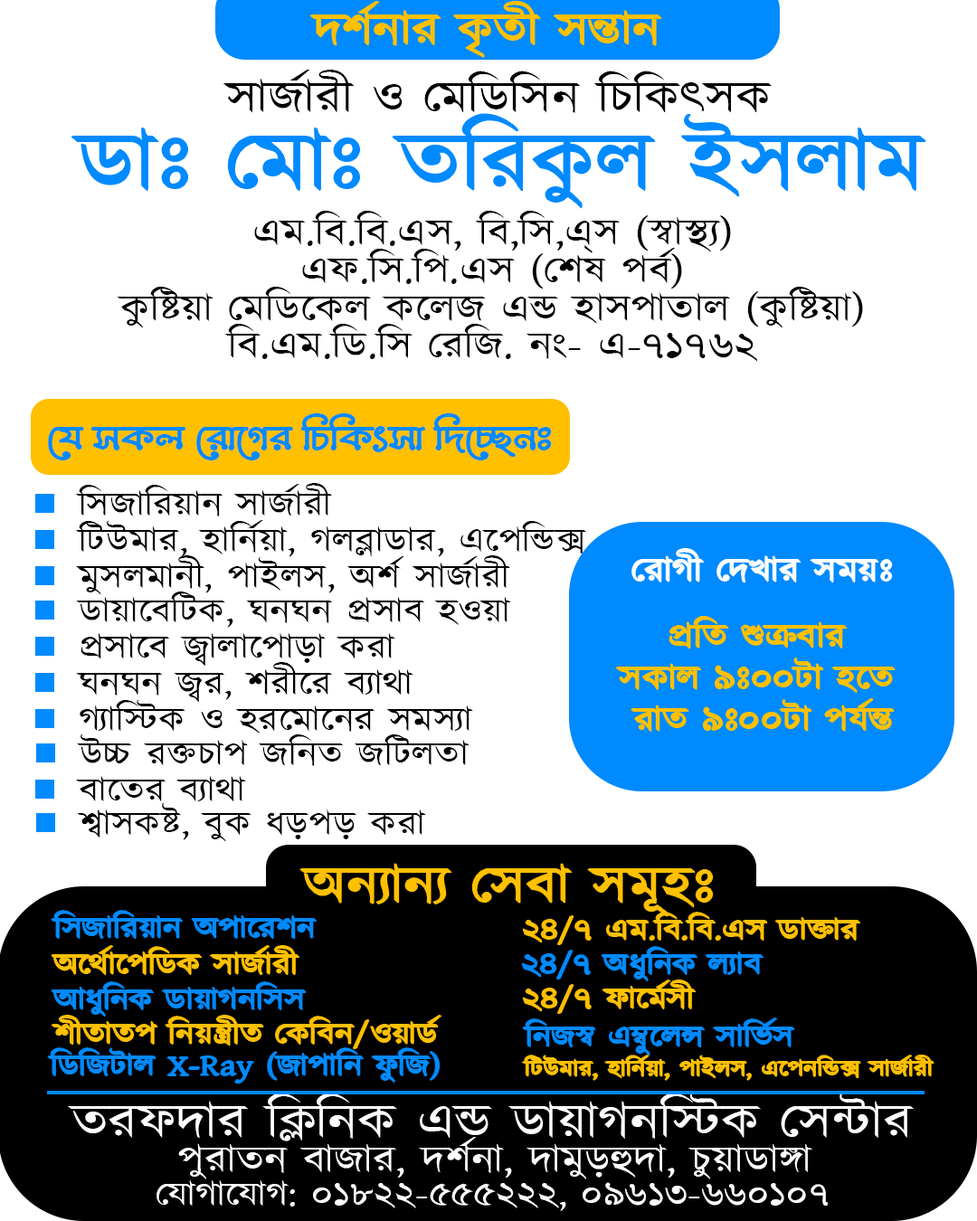
<style>
.page{position:relative;width:977px;height:1221px;background:#ffffff}
.page>*{position:absolute;margin:0}
.t1{font:45.2px "Kalpurush";color:#ffc000;scale:1.16 1}
.t2{font:45.2px "Kalpurush";color:#000000;scale:1.16 1}
.t3{font:82.9px "Kalpurush";color:#008aff;scale:1.16 1}
.t4{font:37.7px/37.7px "Kalpurush";color:#000000;scale:1.16 1}
.t5{font:37.7px "LiShohidBarkatUnicode";color:#008aff;scale:1.16 1}
.t6{font:33.9px "Kalpurush";color:#000000;scale:1.16 1}
.t7{font:33.9px "Kalpurush";color:#ffffff;scale:1.16 1}
.t8{font:33.9px/41.4px "Kalpurush";color:#ffc000;scale:1.16 1}
.t9{font:52.8px "Kalpurush";color:#ffc000;scale:1.16 1}
.t10{font:30.1px "Kalpurush";color:#008aff;scale:1.16 1}
.t11{font:30.1px "Kalpurush";color:#ffc000;scale:1.16 1}
.t12{font:22.6px "Kalpurush";color:#ffc000;scale:1.16 1}
.t13{font:49px "Kalpurush";color:#ffffff;scale:1.16 1}
.t14{font:37.7px "Kalpurush";color:#ffffff;scale:1.16 1}
.t15{font:33.9px "Kalpurush";color:#fffefe;scale:1.16 1}
</style>
<div class="page">
<p class="t1" style="left:310px;top:2px;width:351px;height:55px">দর্শনার কৃতী সন্তান</p>
<p class="t2" style="left:222px;top:70px;width:549px;height:43px">সার্জারী ও মেডিসিন চিকিৎসক</p>
<p class="t3" style="left:71px;top:114px;width:854px;height:94px">ডাঃ মোঃ তরিকুল ইসলাম</p>
<p class="t4" style="left:117px;top:211px;width:746px;height:151px;text-align:center">এম.বি.বি.এস, বি,সি,এ্স (স্বাস্থ্য)<br>এফ.সি.পি.এস (শেষ পর্ব)<br>কুষ্টিয়া মেডিকেল কলেজ এন্ড হাসপাতাল (কুষ্টিয়া)<br>বি.এম.ডি.সি রেজি. নং- এ-৭১৭৬২</p>
<p class="t5" style="left:48px;top:413px;width:504px;height:47px">যে সকল রোগের চিকিৎসা দিচ্ছেনঃ</p>
<p class="t6" style="left:75px;top:483px;width:258px;height:33px">সিজারিয়ান সার্জারী</p>
<p class="t6" style="left:75px;top:520px;width:511px;height:37px">টিউমার, হার্নিয়া, গলব্লাডার, এপেন্ডিক্স</p>
<p class="t6" style="left:76px;top:555px;width:435px;height:40px">মুসলমানী, পাইলস, অর্শ সার্জারী</p>
<p class="t7" style="left:632px;top:549px;width:260px;height:33px">রোগী দেখার সময়ঃ</p>
<p class="t6" style="left:76px;top:591px;width:435px;height:37px">ডায়াবেটিক, ঘনঘন প্রসাব হওয়া</p>
<p class="t8" style="left:616px;top:617px;width:278px;height:115px;text-align:center">প্রতি শুক্রবার <br>সকাল ৯ঃ০০টা হতে <br>রাত ৯ঃ০০টা পর্যন্ত</p>
<p class="t6" style="left:80px;top:633px;width:315px;height:33px">প্রসাবে জ্বালাপোড়া করা</p>
<p class="t6" style="left:76px;top:662px;width:337px;height:40px">ঘনঘন জ্বর, শরীরে ব্যাথা</p>
<p class="t6" style="left:80px;top:700px;width:393px;height:34px">গ্যাস্টিক ও হরমোনের সমস্যা</p>
<p class="t6" style="left:77px;top:734px;width:392px;height:32px">উচ্চ রক্তচাপ জনিত জটিলতা</p>
<p class="t6" style="left:76px;top:776px;width:170px;height:26px">বাতের ব্যাথা</p>
<p class="t6" style="left:77px;top:803px;width:349px;height:39px">শ্বাসকষ্ট, বুক ধড়পড় করা</p>
<p class="t9" style="left:300px;top:864px;width:413px;height:52px">অন্যান্য সেবা সমূহঃ</p>
<p class="t10" style="left:52px;top:911px;width:265px;height:28px">সিজারিয়ান অপারেশন</p>
<p class="t11" style="left:523px;top:912px;width:337px;height:32px">২৪/৭ এম.বি.বি.এস ডাক্তার</p>
<p class="t11" style="left:52px;top:946px;width:247px;height:29px">অর্থোপেডিক সার্জারী</p>
<p class="t10" style="left:522px;top:947px;width:241px;height:34px">২৪/৭ অধুনিক ল্যাব</p>
<p class="t10" style="left:52px;top:982px;width:254px;height:34px">আধুনিক ডায়াগনসিস</p>
<p class="t11" style="left:523px;top:980px;width:172px;height:33px">২৪/৭ ফার্মেসী</p>
<p class="t11" style="left:52px;top:1016px;width:389px;height:32px">শীতাতপ নিয়ন্ত্রীত কেবিন/ওয়ার্ড</p>
<p class="t10" style="left:523px;top:1018px;width:271px;height:37px">নিজস্ব এম্বুলেন্স সার্ভিস</p>
<p class="t10" style="left:48px;top:1048px;width:392px;height:35px">ডিজিটাল X-Ray (জাপানি ফুজি)</p>
<p class="t12" style="left:522px;top:1055px;width:411px;height:25px">টিউমার, হার্নিয়া, পাইলস, এপেনন্ডিক্স সার্জারী</p>
<p class="t13" style="left:68px;top:1092px;width:845px;height:49px">তরফদার ক্লিনিক এন্ড ডায়াগনস্টিক সেন্টার</p>
<p class="t14" style="left:178px;top:1137px;width:634px;height:42px">পুরাতন বাজার, দর্শনা, দামুড়হুদা, চুয়াডাঙ্গা</p>
<p class="t15" style="left:156px;top:1180px;width:671px;height:31px">যোগাযোগ: ০১৮২২-৫৫৫২২২, ০৯৬১৩-৬৬০১০৭</p>
</div>
